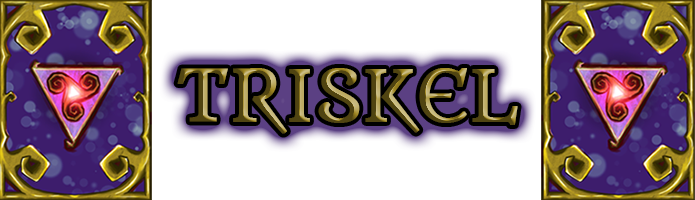
<style>
.page{position:relative;width:695px;height:200px;background:#ffffff}
.page>*{position:absolute;margin:0}
.t1{font:69.6px "Metamorphous";font-weight:bold}
</style>
<div class="page">
<p class="t1" style="left:177px;top:68px;width:341px;height:66px">TRISKEL</p>
</div>
